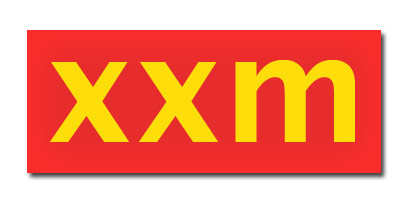
<style>
.page{position:relative;width:400px;height:200px;background:#ffffff}
.page>*{position:absolute;margin:0}
.t1{font:150px "LucidaSans-Demi";color:#fdde0b}
</style>
<div class="page">
<p class="t1" style="left:49px;top:60px;width:306px;height:82px">xxm</p>
</div>
